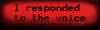
<style>
.page{position:relative;width:100px;height:30px}
.page>*{position:absolute;margin:0}
.t1{font:8px "Terminal";color:#0b0000}
</style>
<div class="page">
<p class="t1" style="left:14px;top:4px;width:72px;height:17px">I responded<br>to the voice</p>
</div>
